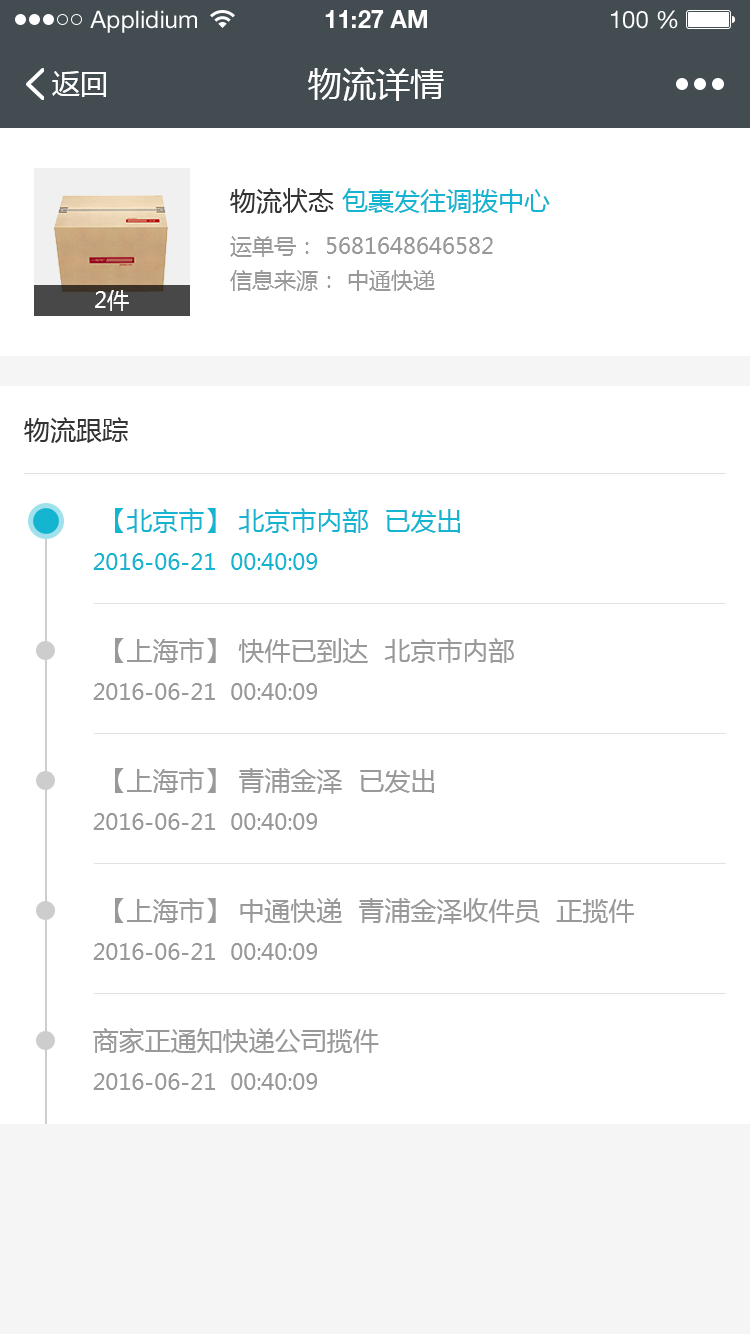
<style>
.page{position:relative;width:750px;height:1334px;background:#ffffff}
.page>*{position:absolute;margin:0}
.t1{font:24px "HelveticaNeueLTStd-Roman";color:#ffffff}
.t2{font:24px "HelveticaNeueLTStd-Bd";color:#ffffff}
.t3{font:28px "MicrosoftYaHei";color:#ffffff}
.t4{font:34px "MicrosoftYaHei";color:#ffffff}
.t5{font:22px/44px "MicrosoftYaHei";color:#999999}
.t6{font:26px/54px "MicrosoftYaHei";color:#333333}
.t7{font:26px/54px "MicrosoftYaHei";color:#15b4d0}
.t8{font:22px/34px "MicrosoftYaHei";color:#999999}
.t9{font:22px "MicrosoftYaHei";color:#ffffff}
.t10{font:26px "MicrosoftYaHei";color:#333333}
.t11{font:22px/40px "MicrosoftYaHei";color:#15b4d0}
.t12{font:26px/40px "MicrosoftYaHei";color:#15b4d0}
.t13{font:22px/40px "MicrosoftYaHei";color:#999999}
.t14{font:26px/40px "MicrosoftYaHei";color:#999999}
</style>
<div class="page">
<p class="t1" style="left:90px;top:10px;width:107px;height:23px">Applidium</p>
<p class="t2" style="left:325px;top:10px;width:102px;height:18px">11:27 AM</p>
<p class="t1" style="left:611px;top:10px;width:67px;height:19px">100 %</p>
<p class="t3" style="left:52px;top:71px;width:54px;height:26px">返回</p>
<p class="t4" style="left:308px;top:67px;width:136px;height:34px">物流详情</p>
<p class="t5" style="left:230px;top:188px;width:320px;height:103px"><span class="t6">物流状态 </span><span class="t7">包裹发往调拨中心<br></span>运单号： 5681648646582<br><span class="t8">信息来源： 中通快递</span></p>
<p class="t9" style="left:95px;top:290px;width:34px;height:21px">2件</p>
<p class="t10" style="left:24px;top:417px;width:104px;height:26px">物流跟踪</p>
<p class="t11" style="left:93px;top:508px;width:367px;height:62px"><span class="t12"> 【北京市】 北京市内部  已发出<br></span>2016-06-21  00:40:09</p>
<p class="t13" style="left:93px;top:638px;width:421px;height:62px"><span class="t14"> 【上海市】 快件已到达  北京市内部<br></span>2016-06-21  00:40:09</p>
<p class="t13" style="left:93px;top:768px;width:341px;height:62px"><span class="t14"> 【上海市】 青浦金泽  已发出<br></span>2016-06-21  00:40:09</p>
<p class="t14" style="left:93px;top:898px;width:541px;height:62px">【上海市】 中通快递  青浦金泽收件员  正揽件<br><span class="t13">2016-06-21  00:40:09</span></p>
<p class="t13" style="left:93px;top:1028px;width:286px;height:62px"><span class="t14">商家正通知快递公司揽件<br></span>2016-06-21  00:40:09</p>
</div>
